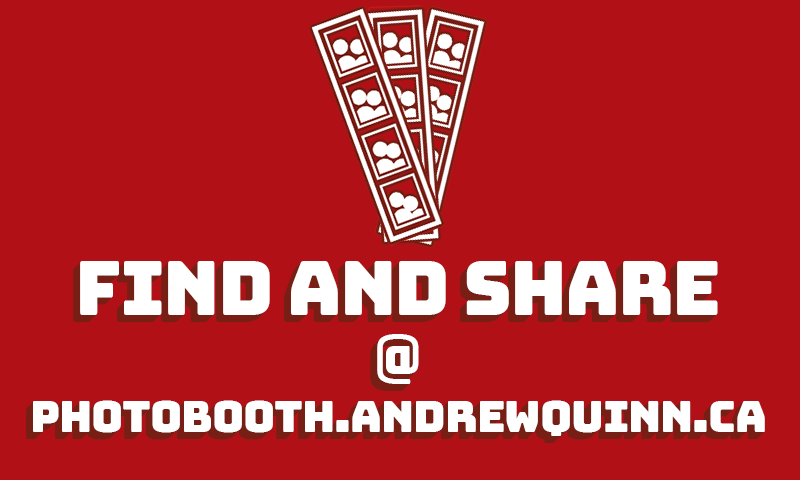
<style>
.page{position:relative;width:800px;height:480px;background:#b11116}
.page>*{position:absolute;margin:0}
.t1{font:75px "Bungee-Regular";letter-spacing:-0.025em;color:#ffffff}
.t2{font:55px "Bungee-Regular";letter-spacing:-0.025em}
.t3{font:55px "Bungee-Regular";letter-spacing:-0.025em;color:#ffffff}
.t4{font:44px "Bungee-Regular";letter-spacing:-0.025em;color:#ffffff}
.t5{font:44px "Bungee-Regular";letter-spacing:-0.025em}
</style>
<div class="page">
<p class="t1" style="left:76px;top:265px;width:638px;height:54px">Find and share</p>
<p class="t1" style="left:77px;top:264px;width:638px;height:54px">Find and share</p>
<p class="t1" style="left:78px;top:263px;width:638px;height:54px">Find and share</p>
<p class="t1" style="left:79px;top:262px;width:638px;height:54px">Find and share</p>
<p class="t1" style="left:80px;top:261px;width:638px;height:54px">Find and share</p>
<p class="t2" style="left:372px;top:339px;width:42px;height:50px">@</p>
<p class="t2" style="left:375px;top:336px;width:42px;height:50px">@</p>
<p class="t3" style="left:376px;top:335px;width:42px;height:50px">@</p>
<p class="t3" style="left:377px;top:334px;width:42px;height:50px">@</p>
<p class="t4" style="left:32px;top:401px;width:732px;height:36px">photobooth.andrewquinn.ca</p>
<p class="t4" style="left:33px;top:400px;width:732px;height:36px">photobooth.andrewquinn.ca</p>
<p class="t5" style="left:30px;top:403px;width:732px;height:36px">photobooth.andrewquinn.ca</p>
<p class="t4" style="left:31px;top:402px;width:732px;height:36px">photobooth.andrewquinn.ca</p>
</div>
